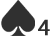
<style>
.page{position:relative;width:52px;height:36px;background:#ffffff}
.page>*{position:absolute;margin:0}
.t1{font:23.4px "MyriadPro-Regular";letter-spacing:-0.1em;color:#303030;font-weight:bold}
</style>
<div class="page">
<p class="t1" style="left:38px;top:19px;width:12px;height:17px">4</p>
</div>
